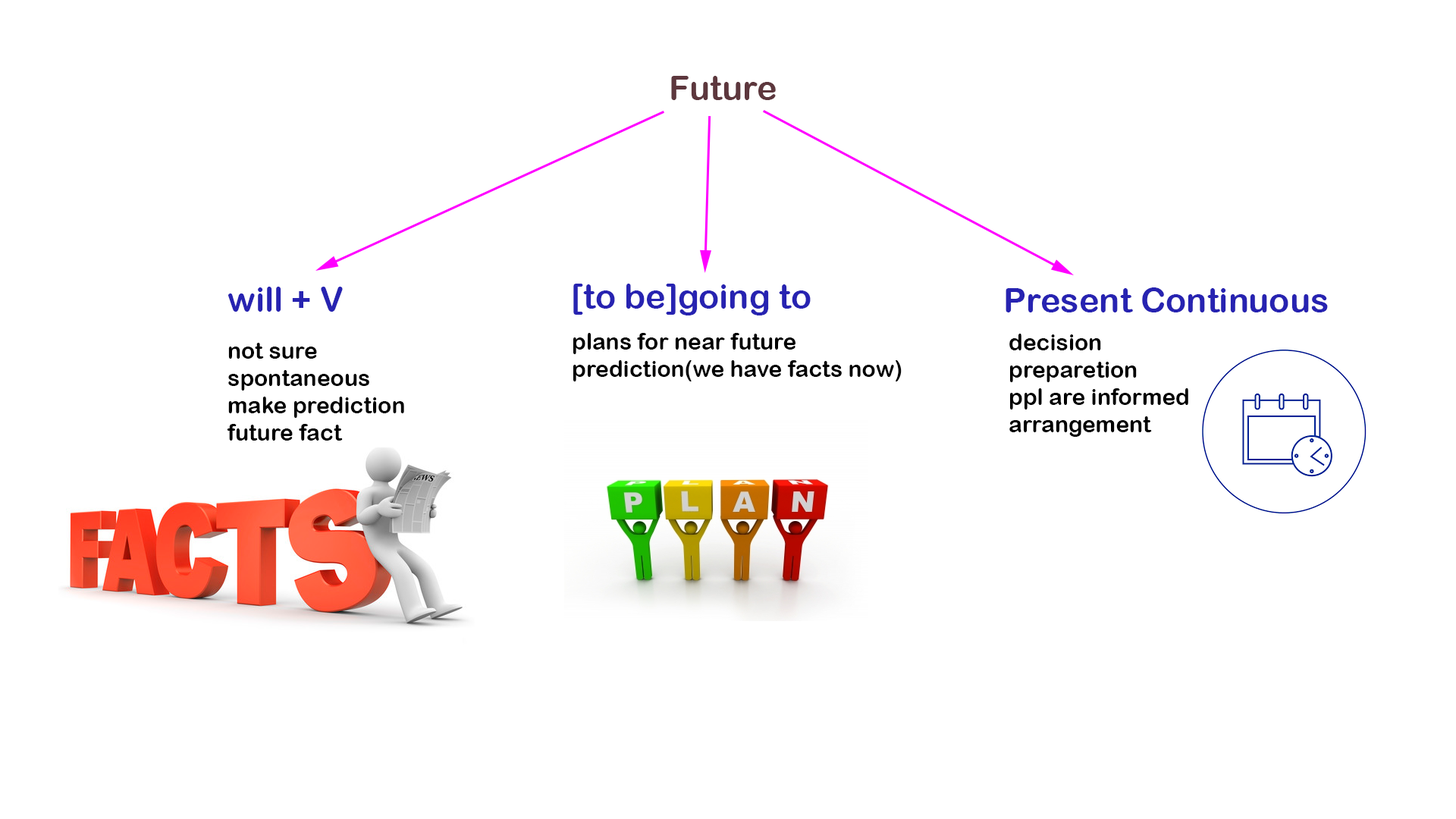
<style>
.page{position:relative;width:1456px;height:819px;background:#ffffff}
.page>*{position:absolute;margin:0}
.t1{font:34.1px "ArialRoundedMTBold";color:#5d373d}
.t2{font:34.1px "ArialRoundedMTBold";color:#2723b1}
.t3{font:22.7px "ArialRoundedMTBold";color:#000000}
.t4{font:22.7px "ArialRoundedMTBold";color:#010101}
</style>
<div class="page">
<p class="t1" style="left:671px;top:76px;width:105px;height:24px">Future</p>
<p class="t2" style="left:228px;top:287px;width:115px;height:25px">will + V</p>
<p class="t2" style="left:573px;top:284px;width:238px;height:31px">[to be]going to</p>
<p class="t2" style="left:1006px;top:287px;width:322px;height:25px">Present Continuous</p>
<p class="t3" style="left:573px;top:333px;width:329px;height:48px">plans for near future<br>prediction(we have facts now)</p>
<p class="t3" style="left:1009px;top:334px;width:179px;height:103px">decision<br>preparetion<br>ppl are informed<br>arrangement</p>
<p class="t3" style="left:227px;top:343px;width:177px;height:98px"><span class="t4">not sure<br></span>spontaneous<br>make prediction<br>future fact</p>
</div>
